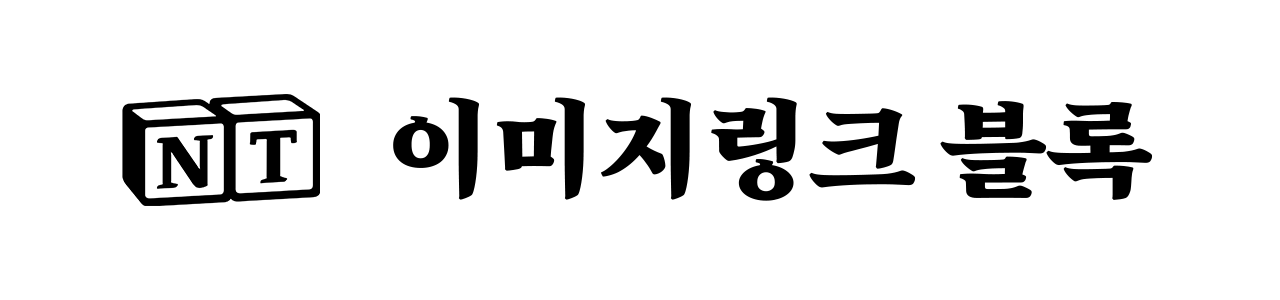
<style>
.page{position:relative;width:1280px;height:300px;background:#ffffff}
.page>*{position:absolute;margin:0}
.t1{font:109.1px "RixDongnimMyeongjoR";color:#000000}
</style>
<div class="page">
<p class="t1" style="left:393px;top:97px;width:760px;height:104px">이미지링크 블록</p>
</div>
